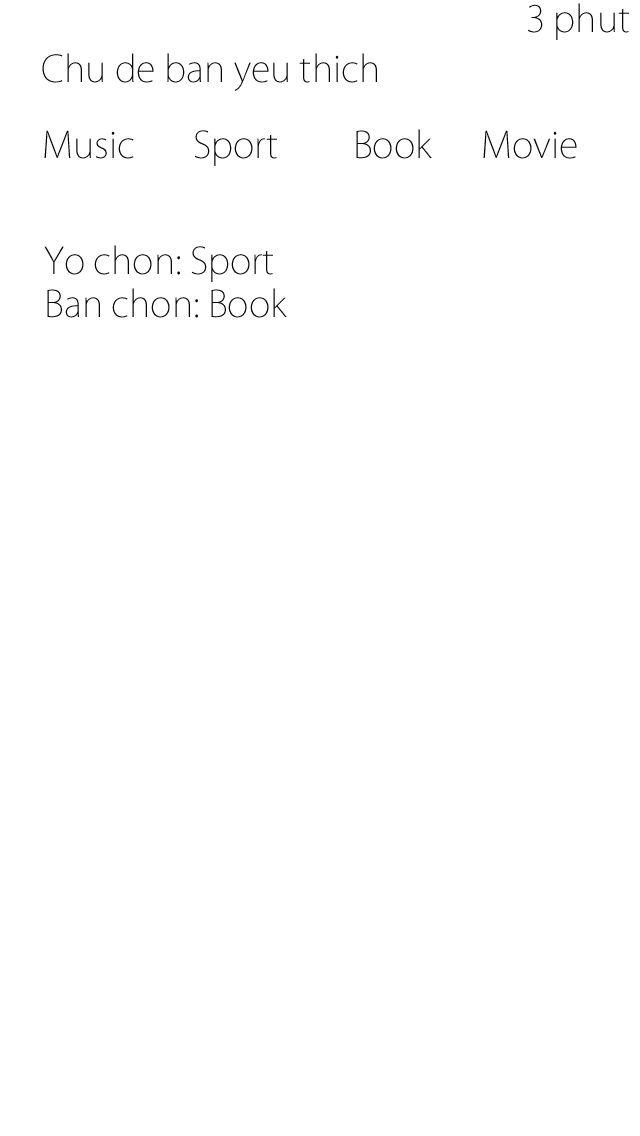
<style>
.page{position:relative;width:640px;height:1136px;background:#ffffff}
.page>*{position:absolute;margin:0}
.t1{font:36px "KozGoPro-ExtraLight";color:#040404}
</style>
<div class="page">
<p class="t1" style="left:528px;top:3px;width:101px;height:37px">3 phut</p>
<p class="t1" style="left:42px;top:53px;width:335px;height:38px">Chu de ban yeu thich</p>
<p class="t1" style="left:44px;top:129px;width:533px;height:37px">Music       Sport         Book      Movie</p>
<p class="t1" style="left:44px;top:245px;width:243px;height:73px">Yo chon: Sport <br>Ban chon: Book</p>
</div>
